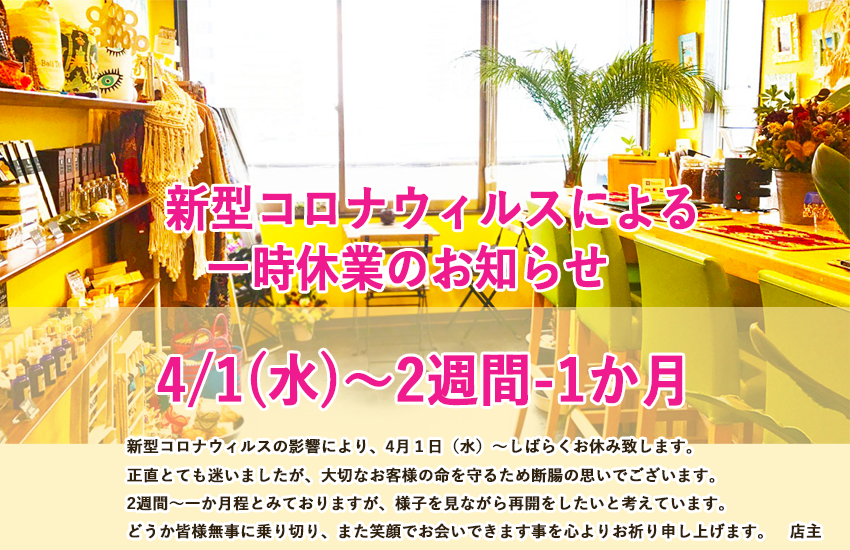
<style>
.page{position:relative;width:850px;height:550px}
.page>*{position:absolute;margin:0}
.t1{font:49.2px/60px "YuGothic-Bold";color:#ef1b8e;font-weight:bold;scale:0.89 1}
.t2{font:57.5px "YuGothic-Bold";color:#ef1b8e;font-weight:bold;scale:0.9 1}
.t3{font:15.7px/14.1px "YuGothic-Bold";color:#32220c;font-weight:bold}
</style>
<div class="page">
<p class="t1" style="left:166px;top:184px;width:529px;height:107px">新型コロナウィルスによる<br>   一時休業のお知らせ</p>
<p class="t2" style="left:157px;top:350px;width:526px;height:59px">4/1(水)～2週間-1か月</p>
<p class="t3" style="left:127px;top:438px;width:694px;height:101px">新型コロナウィルスの影響により、4月１日（水）～しばらくお休み致します。<br><br>正直とても迷いましたが、大切なお客様の命を守るため断腸の思いでございます。<br><br>2週間～一か月程とみておりますが、様子を見ながら再開をしたいと考えています。<br><br>どうか皆様無事に乗り切り、また笑顔でお会いできます事を心よりお祈り申し上げます。　店主</p>
</div>
